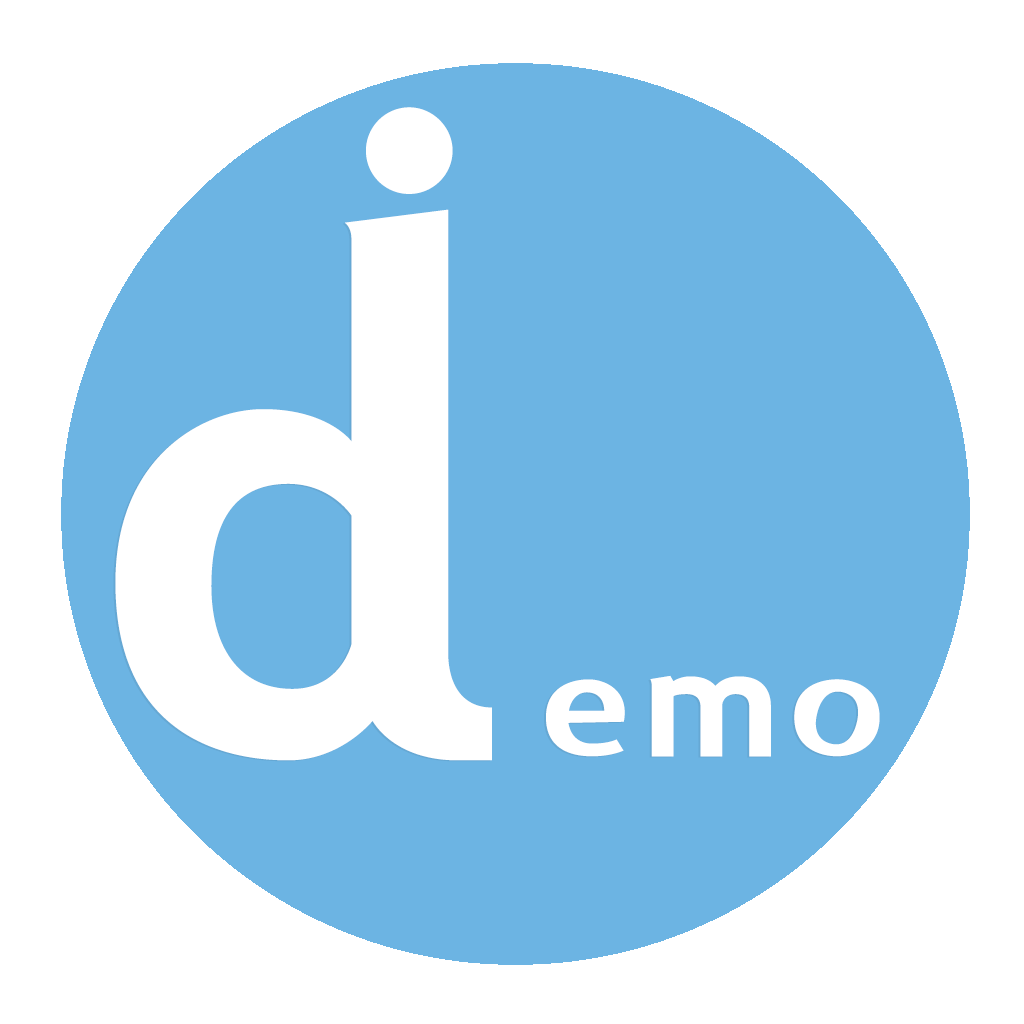
<style>
.page{position:relative;width:1024px;height:1024px;background:#6cb4e3}
.page>*{position:absolute;margin:0}
.t1{font:600px "BSRUBANSOMDEJ-Bold";letter-spacing:0.05em;color:#ffffff}
.t2{font:180px "BSRUBANSOMDEJ-Bold";letter-spacing:0.05em;color:#ffffff}
.t3{font:811px "BSRUBANSOMDEJ-Bold";letter-spacing:0.05em;color:#ffffff}
</style>
<div class="page">
<p class="t1" style="left:366px;top:107px;width:87px;height:379px">i</p>
<p class="t2" style="left:115px;top:209px;width:765px;height:552px"><span class="t3">d</span>emo</p>
</div>
